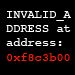
<style>
.page{position:relative;width:75px;height:75px;background:#000000}
.page>*{position:absolute;margin:0}
.t1{font:12px "Courier";color:#ffffff}
.t2{font:12px "Courier";color:#ff1700}
</style>
<div class="page">
<p class="t1" style="left:6px;top:11px;width:65px;height:50px">INVALID_ADDRESS at address: <span class="t2">0xf8c3b00</span>k</p>
</div>
